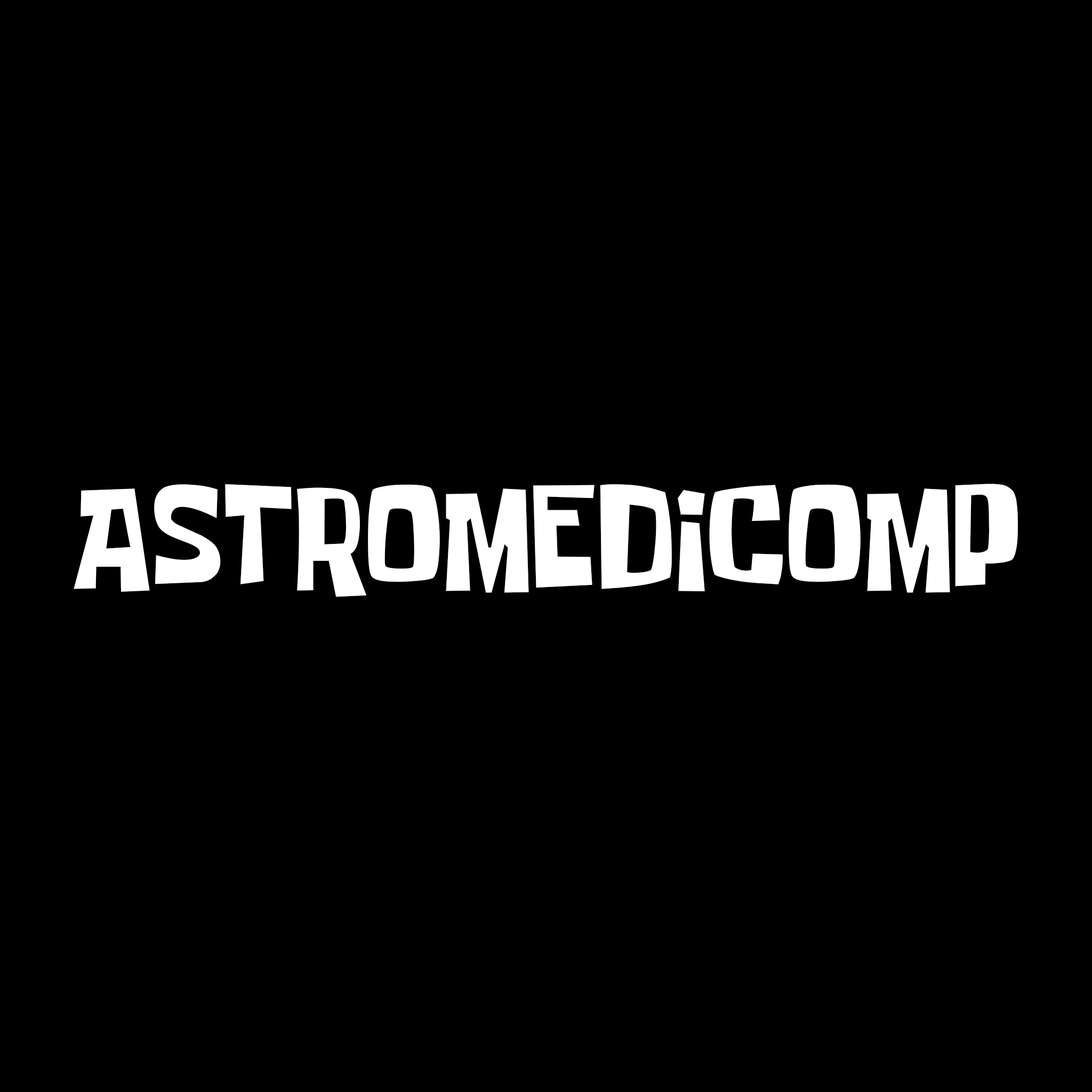
<style>
.page{position:relative;width:1092px;height:1092px;background:#000000}
.page>*{position:absolute;margin:0}
.t1{font:114.1px "SpongeboyMeBob";color:#ffffff}
</style>
<div class="page">
<p class="t1" style="left:74px;top:484px;width:944px;height:113px">ASTROMEDICOMP</p>
</div>
